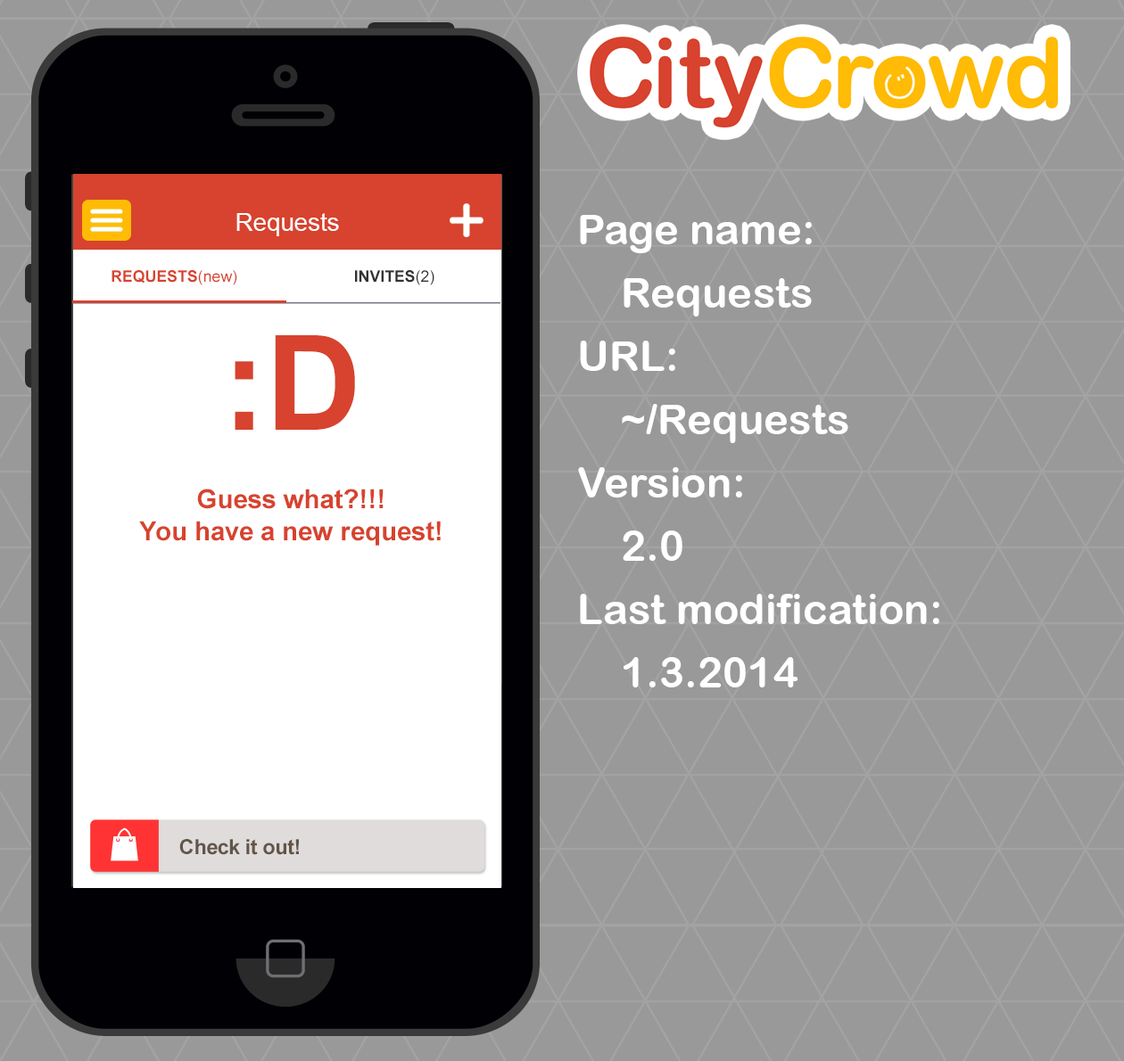
<style>
.page{position:relative;width:1124px;height:1061px;background:#999999}
.page>*{position:absolute;margin:0}
.t1{font:24.6px "ArialMT";color:#ffffff}
.t2{font:42.2px/63.3px "ArialRoundedMTBold";color:#ffffff}
.t3{font:15.8px "Arial-BoldMT";color:#d7432e;text-transform:uppercase}
.t4{font:15.8px "ArialMT";color:#d7432e;text-transform:uppercase}
.t5{font:15.8px "ArialMT";color:#d7432e}
.t6{font:15.8px "Arial-BoldMT";color:#333333;text-transform:uppercase}
.t7{font:15.8px "ArialMT";color:#333333;text-transform:uppercase}
.t8{font:26.4px "Arial-BoldMT";color:#d7432e}
.t9{font:131.9px/79.1px "Arial-BoldMT";color:#d7432e}
.t10{font:26.4px/79.1px "Arial-BoldMT";color:#d7432e}
.t11{font:20.8px "Arial-BoldMT";color:#625548}
</style>
<div class="page">
<p class="t1" style="left:236px;top:213px;width:103px;height:23px">Requests</p>
<p class="t2" style="left:578px;top:215px;width:361px;height:473px">Page name:<br>Requests<br>URL:<br>~/Requests<br>Version:<br>2.0<br>Last modification:<br>1.3.2014</p>
<p class="t3" style="left:111px;top:270px;width:126px;height:15px">REQUESTS<span class="t4">(</span><span class="t5">new</span><span class="t4">)</span></p>
<p class="t6" style="left:355px;top:270px;width:79px;height:15px">INVITES<span class="t7">(2)</span></p>
<p class="t8" style="left:139px;top:335px;width:302px;height:211px;text-align:center"><span class="t9">:D<br></span><span class="t10">Guess what?!!!<br></span>You have a new request!</p>
<p class="t11" style="left:179px;top:839px;width:120px;height:16px">Check it out!</p>
</div>
